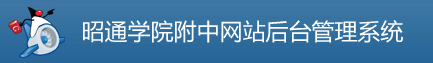
<style>
.page{position:relative;width:433px;height:63px}
.page>*{position:absolute;margin:0}
.t1{font:23px "MicrosoftYaHei";color:#ffffff}
</style>
<div class="page">
<p class="t1" style="left:83px;top:20px;width:320px;height:23px">昭通学院附中网站后台管理系统</p>
</div>
